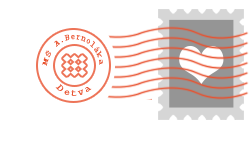
<style>
.page{position:relative;width:250px;height:167px;background:#ffffff}
.page>*{position:absolute;margin:0}
.t1{font:9px "CourierNewPSMT";letter-spacing:0.2em;color:#e8512e;scale:0.36 1}
.t2{font:9.3px "CourierNewPSMT";letter-spacing:0.2em;color:#e8512e;scale:0.46 1}
</style>
<div class="page">
<p class="t1" style="left:42px;top:34px;width:61px;height:32px;rotate:16deg">MŠ A.Bernoláka</p>
<p class="t2" style="left:55px;top:84px;width:37px;height:12px;rotate:-36deg">Detva</p>
</div>
